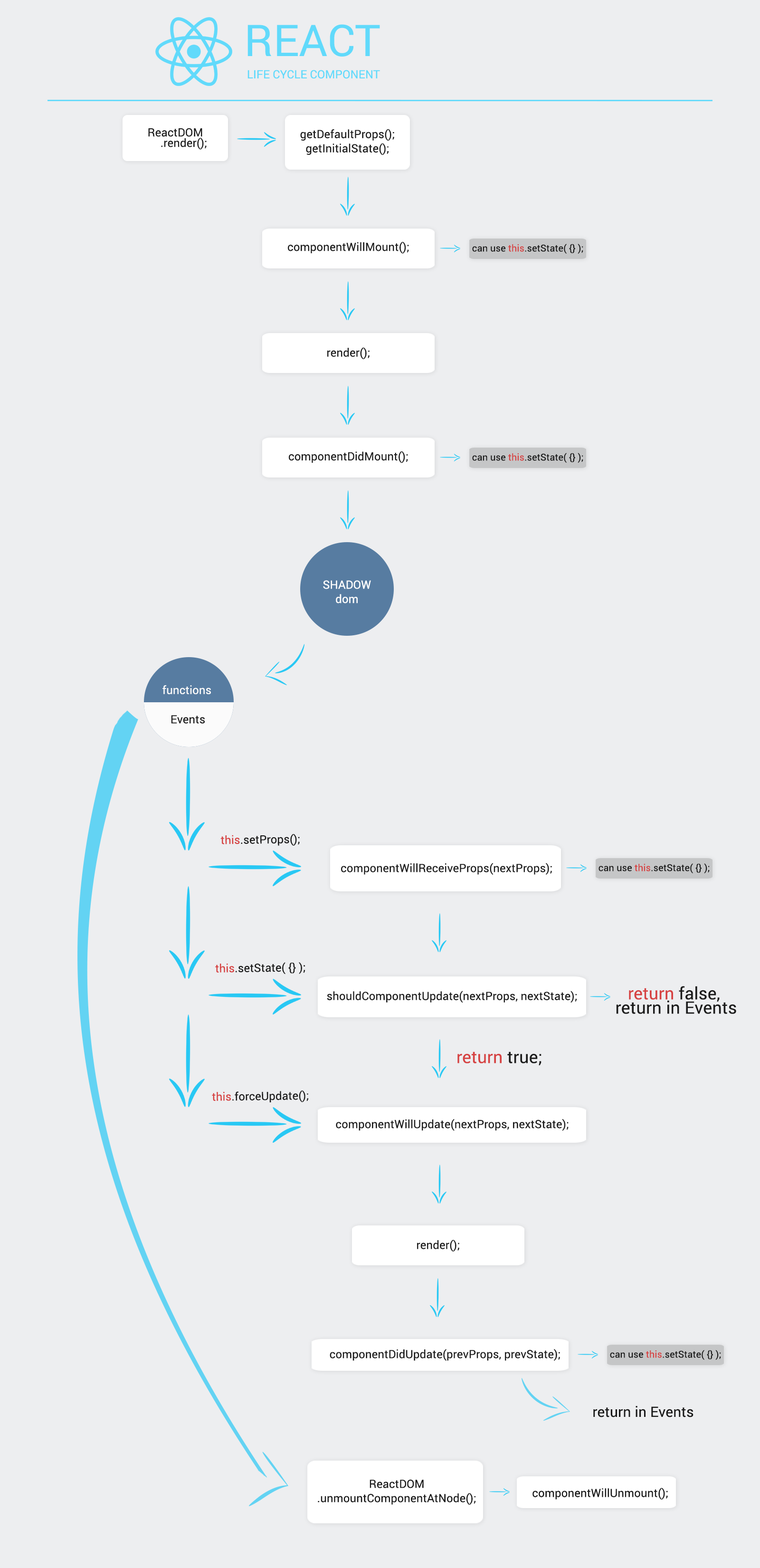
<style>
.page{position:relative;width:760px;height:1568px;background:#edeef0}
.page>*{position:absolute;margin:0}
.t1{font:43.7px "Roboto-Regular";letter-spacing:0.005em;color:#61dafb}
.t2{font:11.4px "Roboto-Regular";letter-spacing:0.005em;color:#61dafb;text-transform:uppercase}
.t3{font:11.4px/10.5px "Roboto-Regular";letter-spacing:0.005em;color:#1b1b1b}
.t4{font:11.4px/10.5px "Roboto-Regular";letter-spacing:0.005em;color:#1b1b1b;text-transform:uppercase}
.t5{font:11.4px/14.3px "Roboto-Regular";letter-spacing:0.005em;color:#1b1b1b}
.t6{font:9.5px "Roboto-Regular";letter-spacing:0.005em;color:#171717}
.t7{font:9.5px "Roboto-Regular";letter-spacing:0.005em;color:#d64141}
.t8{font:11.4px "Roboto-Regular";letter-spacing:0.005em;color:#1b1b1b}
.t9{font:11.4px/14.3px "Roboto-Regular";letter-spacing:0.005em;color:#ffffff}
.t10{font:11.4px "Roboto-Regular";letter-spacing:0.005em;color:#fbfbfb}
.t11{font:11.4px "Roboto-Regular";letter-spacing:0.005em;color:#d64141}
.t12{font:17.1px/14.3px "Roboto-Regular";letter-spacing:0.005em;color:#1b1b1b}
.t13{font:17.1px/14.3px "Roboto-Regular";letter-spacing:0.005em;color:#d64141}
.t14{font:17.1px "Roboto-Regular";letter-spacing:0.005em;color:#d64141}
.t15{font:17.1px "Roboto-Regular";letter-spacing:0.005em;color:#1b1b1b}
.t16{font:14.3px "Roboto-Regular";letter-spacing:0.005em;color:#171717}
.t17{font:11.4px/14.3px "Roboto-Regular";letter-spacing:0.005em;color:#171717}
.t18{font:11.4px "Roboto-Regular";letter-spacing:0.005em;color:#171717}
</style>
<div class="page">
<p class="t1" style="left:248px;top:24px;width:132px;height:33px">REACT</p>
<p class="t2" style="left:248px;top:70px;width:132px;height:9px">Life cycle component</p>
<p class="t3" style="left:148px;top:128px;width:59px;height:22px;text-align:center"><span class="t4">R</span>eactDOM<br> .render();</p>
<p class="t5" style="left:300px;top:129px;width:94px;height:26px;text-align:center">getDefaultProps();<br>getInitialState();</p>
<p class="t5" style="left:288px;top:241px;width:121px;height:13px;text-align:center">componentWillMount();<br>ount();</p>
<p class="t6" style="left:472px;top:244px;width:111px;height:10px">can use <span class="t7">this</span>.setState( {} );</p>
<p class="t8" style="left:327px;top:347px;width:43px;height:12px">render();</p>
<p class="t8" style="left:289px;top:451px;width:119px;height:12px">componentDidMount();</p>
<p class="t6" style="left:472px;top:453px;width:111px;height:10px">can use <span class="t7">this</span>.setState( {} );</p>
<p class="t9" style="left:323px;top:580px;width:48px;height:23px;text-align:center">SHADOW<br>dom</p>
<p class="t10" style="left:163px;top:685px;width:48px;height:9px">functions</p>
<p class="t8" style="left:171px;top:715px;width:34px;height:9px">Events</p>
<p class="t8" style="left:220px;top:834px;width:80px;height:12px;rotate:-1deg"><span class="t11">this</span>.setProps();</p>
<p class="t8" style="left:341px;top:863px;width:211px;height:12px">componentWillReceiveProps(nextProps);</p>
<p class="t6" style="left:599px;top:863px;width:111px;height:10px">can use <span class="t7">this</span>.setState( {} );</p>
<p class="t8" style="left:215px;top:962px;width:90px;height:13px;rotate:-1deg"><span class="t11">this</span>.setState( {} );</p>
<p class="t12" style="left:616px;top:986px;width:120px;height:28px;text-align:center"><span class="t13">return</span> false, <br>return in Events</p>
<p class="t8" style="left:327px;top:991px;width:250px;height:12px">shouldComponentUpdate(nextProps, nextState);</p>
<p class="t14" style="left:458px;top:1052px;width:84px;height:13px">return<span class="t15"> true;</span></p>
<p class="t8" style="left:212px;top:1090px;width:96px;height:12px;rotate:-1deg"><span class="t11">this</span>.forceUpdate();</p>
<p class="t8" style="left:336px;top:1119px;width:233px;height:12px">componentWillUpdate(nextProps, nextState);</p>
<p class="t8" style="left:417px;top:1240px;width:42px;height:12px">render();</p>
<p class="t8" style="left:330px;top:1349px;width:230px;height:12px">componentDidUpdate(prevProps, prevState);</p>
<p class="t6" style="left:610px;top:1350px;width:111px;height:10px">can use <span class="t7">this</span>.setState( {} );</p>
<p class="t16" style="left:593px;top:1406px;width:101px;height:11px">return in Events</p>
<p class="t17" style="left:318px;top:1480px;width:158px;height:25px;text-align:center">ReactDOM<br>.unmountComponentAtNode();</p>
<p class="t18" style="left:533px;top:1488px;width:135px;height:12px">componentWillUnmount();</p>
</div>
